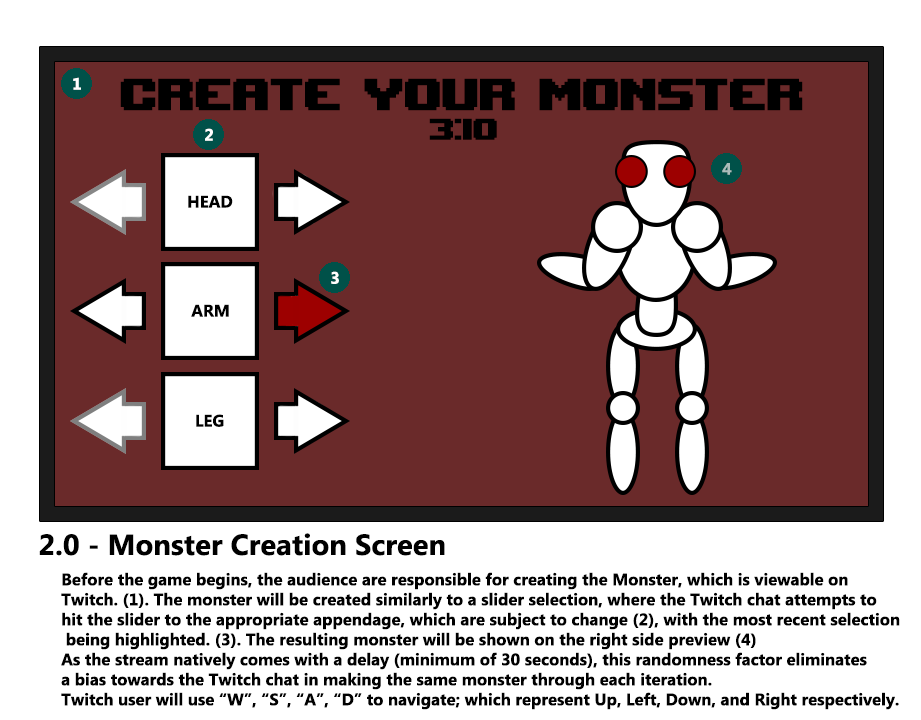
<style>
.page{position:relative;width:921px;height:720px;background:#ffffff}
.page>*{position:absolute;margin:0}
.t1{font:16.7px "Ebrima-Bold";color:#ffffff}
.t2{font:62.5px "UpheavalTT-BRK-";color:#000000}
.t3{font:41.7px "UpheavalTT-BRK-";color:#000000}
.t4{font:16.7px "Ebrima-Bold";color:#acbcba}
.t5{font:16.7px "Ebrima-Bold";color:#000000}
.t6{font:29.2px "Ebrima-Bold";color:#000000}
</style>
<div class="page">
<p class="t1" style="left:73px;top:77px;width:8px;height:13px">1</p>
<p class="t2" style="left:120px;top:78px;width:683px;height:33px">Create Your Monster</p>
<p class="t3" style="left:429px;top:118px;width:68px;height:22px">3:10</p>
<p class="t1" style="left:205px;top:128px;width:8px;height:13px">2</p>
<p class="t4" style="left:722px;top:163px;width:10px;height:12px">4</p>
<p class="t5" style="left:188px;top:195px;width:45px;height:13px">HEAD</p>
<p class="t1" style="left:331px;top:271px;width:8px;height:13px">3</p>
<p class="t5" style="left:191px;top:304px;width:38px;height:13px">ARM</p>
<p class="t5" style="left:196px;top:414px;width:28px;height:13px">LEG</p>
<p class="t6" style="left:39px;top:533px;width:406px;height:23px">2.0 - Monster Creation Screen</p>
<p class="t5" style="left:61px;top:572px;width:839px;height:138px">Before the game begins, the audience are responsible for creating the Monster, which is viewable on <br>Twitch. (1). The monster will be created similarly to a slider selection, where the Twitch chat attempts to <br>hit the slider to the appropriate appendage, which are subject to change (2), with the most recent selection<br> being highlighted. (3). The resulting monster will be shown on the right side preview (4)<br>As the stream natively comes with a delay (minimum of 30 seconds), this randomness factor eliminates <br>a bias towards the Twitch chat in making the same monster through each iteration.<br>Twitch user will use “W”, “S”, “A”, “D” to navigate; which represent Up, Left, Down, and Right respectively.</p>
</div>
